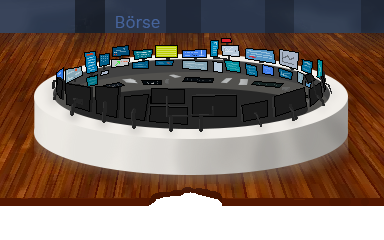
<style>
.page{position:relative;width:384px;height:240px}
.page>*{position:absolute;margin:0}
.t1{font:16.7px "WorkSans-Regular";color:#46649c}
</style>
<div class="page">
<p class="t1" style="left:116px;top:16px;width:44px;height:12px">Börse</p>
</div>
